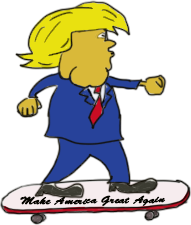
<style>
.page{position:relative;width:191px;height:225px;background:#ffffff}
.page>*{position:absolute;margin:0}
.t1{font:10.4px "BrushScriptStd";color:#050500;font-weight:bold;scale:1.15 1}
</style>
<div class="page">
<p class="t1" style="left:20px;top:195px;width:146px;height:11px;rotate:-1deg">Make America Great Again</p>
</div>
